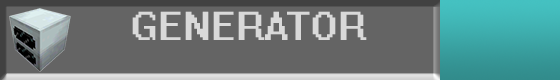
<style>
.page{position:relative;width:560px;height:80px;background:#646464}
.page>*{position:absolute;margin:0}
.t1{font:36px "System";color:#d9d9d9}
</style>
<div class="page">
<p class="t1" style="left:132px;top:11px;width:235px;height:29px">GENERATOR</p>
</div>
